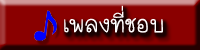
<style>
.page{position:relative;width:200px;height:50px;background:#8a0000}
.page>*{position:absolute;margin:0}
.t1{font:36px "THMaliGrade6-Bold";color:#fefefe}
</style>
<div class="page">
<p class="t1" style="left:64px;top:5px;width:99px;height:28px">เพลงที่ชอบ</p>
</div>
